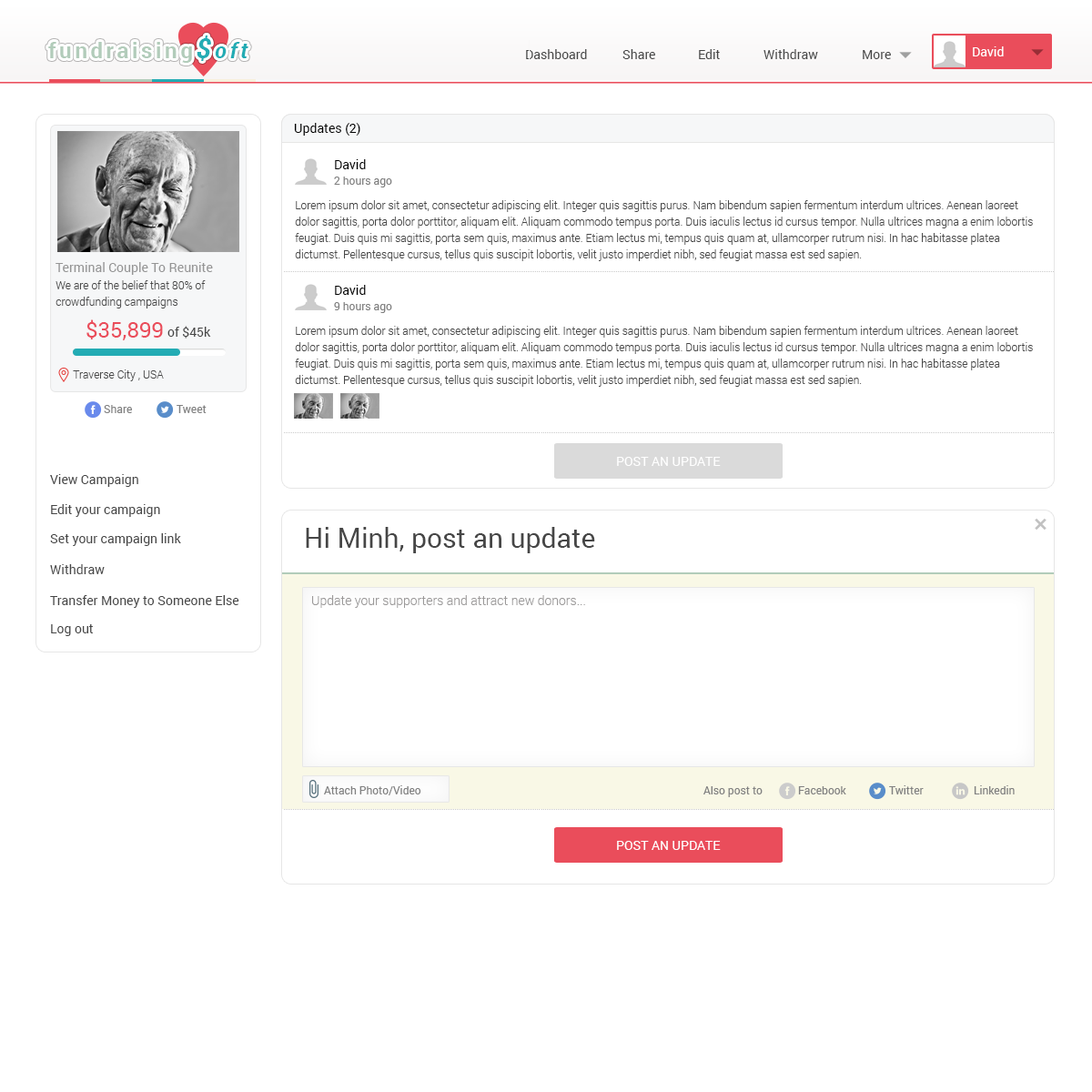
<style>
.page{position:relative;width:1092px;height:1092px;background:#ffffff}
.page>*{position:absolute;margin:0}
.t1{font:21.8px "Roboto-Bold";letter-spacing:0.15em;color:#b2ccba}
.t2{font:27.3px "Roboto-BoldItalic";letter-spacing:0.15em;color:#23acb4}
.t3{font:21.8px "Roboto-BoldItalic";letter-spacing:0.15em;color:#23acb4}
.t4{font:12.7px "Roboto-Regular";color:#464646}
.t5{font:12.7px "Roboto-Regular";color:#ffffff}
.t6{font:12.7px "Roboto-Regular";color:#000000}
.t7{font:10.9px "Roboto-Regular";color:#818181}
.t8{font:10.9px/16.4px "Roboto-Light";color:#464646}
.t9{font:12.7px "Roboto-Regular";color:#959595}
.t10{font:21.8px "Roboto-Regular";color:#ea4d5b}
.t11{font:10.9px "Roboto-Light";color:#464646}
.t12{font:12.7px "Roboto-Regular";color:#ffffff;text-transform:uppercase}
.t13{font:27.3px "Roboto-Regular";color:#464646}
.t14{font:12.7px "Roboto-Light";color:#9b9999}
</style>
<div class="page">
<p class="t1" style="left:48px;top:35px;width:200px;height:28px">fundraising<span class="t2">$</span><span class="t3">oft</span></p>
<p class="t4" style="left:526px;top:49px;width:61px;height:10px">Dashboard</p>
<p class="t4" style="left:622px;top:49px;width:33px;height:10px">Share</p>
<p class="t4" style="left:699px;top:49px;width:21px;height:10px">Edit</p>
<p class="t4" style="left:763px;top:49px;width:55px;height:10px">Withdraw</p>
<p class="t4" style="left:863px;top:50px;width:28px;height:9px">More</p>
<p class="t5" style="left:973px;top:46px;width:31px;height:10px">David</p>
<p class="t6" style="left:294px;top:123px;width:66px;height:13px">Updates (2)</p>
<p class="t6" style="left:335px;top:159px;width:31px;height:10px">David</p>
<p class="t7" style="left:334px;top:177px;width:58px;height:10px">2 hours ago</p>
<p class="t8" style="left:295px;top:200px;width:738px;height:61px">Lorem ipsum dolor sit amet, consectetur adipiscing elit. Integer quis sagittis purus. Nam bibendum sapien fermentum interdum ultrices. Aenean laoreet dolor sagittis, porta dolor porttitor, aliquam elit. Aliquam commodo tempus porta. Duis iaculis lectus id cursus tempor. Nulla ultrices magna a enim lobortis feugiat. Duis quis mi sagittis, porta sem quis, maximus ante. Etiam lectus mi, tempus quis quam at, ullamcorper rutrum nisi. In hac habitasse platea dictumst. Pellentesque cursus, tellus quis suscipit lobortis, velit justo imperdiet nibh, sed feugiat massa est sed sapien.</p>
<p class="t9" style="left:56px;top:262px;width:157px;height:13px">Terminal Couple To Reunite</p>
<p class="t8" style="left:56px;top:280px;width:150px;height:28px">We are of the belief that 80% of crowdfunding campaigns</p>
<p class="t6" style="left:335px;top:285px;width:31px;height:10px">David</p>
<p class="t7" style="left:334px;top:302px;width:58px;height:11px">9 hours ago</p>
<p class="t10" style="left:86px;top:319px;width:77px;height:21px">$35,899</p>
<p class="t4" style="left:167px;top:326px;width:44px;height:13px">of $45k</p>
<p class="t8" style="left:295px;top:326px;width:738px;height:61px">Lorem ipsum dolor sit amet, consectetur adipiscing elit. Integer quis sagittis purus. Nam bibendum sapien fermentum interdum ultrices. Aenean laoreet dolor sagittis, porta dolor porttitor, aliquam elit. Aliquam commodo tempus porta. Duis iaculis lectus id cursus tempor. Nulla ultrices magna a enim lobortis feugiat. Duis quis mi sagittis, porta sem quis, maximus ante. Etiam lectus mi, tempus quis quam at, ullamcorper rutrum nisi. In hac habitasse platea dictumst. Pellentesque cursus, tellus quis suscipit lobortis, velit justo imperdiet nibh, sed feugiat massa est sed sapien.</p>
<p class="t11" style="left:73px;top:369px;width:91px;height:12px">Traverse City , USA</p>
<p class="t7" style="left:104px;top:405px;width:28px;height:8px">Share</p>
<p class="t7" style="left:177px;top:405px;width:30px;height:8px">Tweet</p>
<p class="t12" style="left:617px;top:457px;width:104px;height:9px">POST AN UPDATE</p>
<p class="t4" style="left:50px;top:474px;width:88px;height:13px">View Campaign</p>
<p class="t4" style="left:51px;top:504px;width:109px;height:13px">Edit your campaign</p>
<p class="t4" style="left:50px;top:533px;width:131px;height:13px">Set your campaign link</p>
<p class="t13" style="left:306px;top:527px;width:289px;height:26px">Hi Minh, post an update</p>
<p class="t4" style="left:50px;top:564px;width:55px;height:10px">Withdraw</p>
<p class="t4" style="left:50px;top:595px;width:189px;height:13px">Transfer Money to Someone Else</p>
<p class="t14" style="left:312px;top:595px;width:273px;height:13px">Update your supporters and attract new donors...</p>
<p class="t4" style="left:51px;top:624px;width:42px;height:12px">Log out</p>
<p class="t7" style="left:324px;top:785px;width:97px;height:10px">Attach Photo/Video</p>
<p class="t7" style="left:889px;top:785px;width:35px;height:9px">Twitter</p>
<p class="t7" style="left:974px;top:785px;width:41px;height:9px">Linkedin</p>
<p class="t7" style="left:703px;top:786px;width:60px;height:11px">Also post to</p>
<p class="t7" style="left:798px;top:786px;width:48px;height:8px">Facebook</p>
<p class="t12" style="left:617px;top:841px;width:104px;height:9px">POST AN UPDATE</p>
</div>
